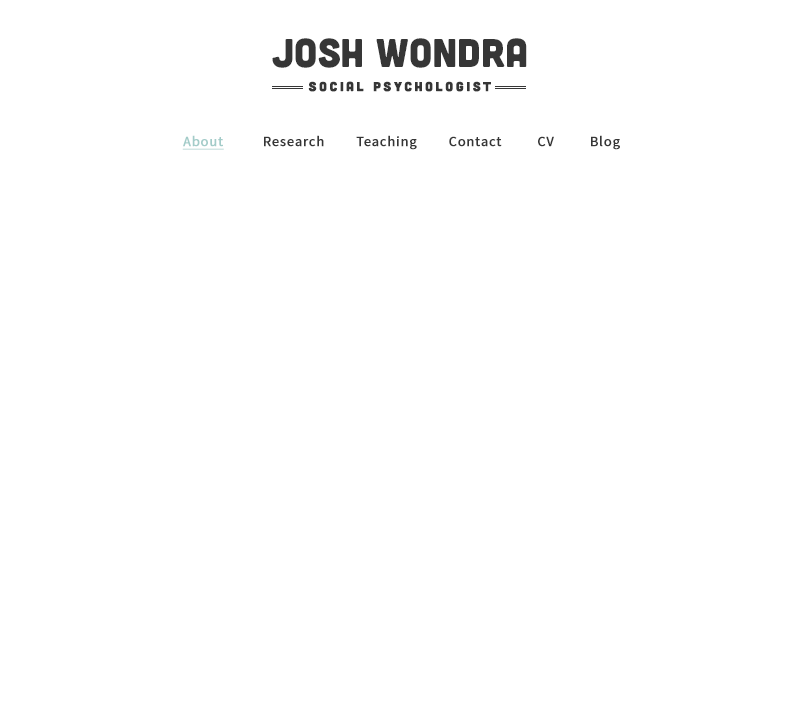
<style>
.page{position:relative;width:800px;height:704px;background:#ffffff}
.page>*{position:absolute;margin:0}
.t1{font:40px "Cubano-Regular";color:#363636}
.t2{font:13px "Cubano-Regular";letter-spacing:0.2em;color:#363636;font-weight:bold}
.t3{font:14px "SourceSansPro-Regular";letter-spacing:0.05em;color:#363636;font-weight:bold}
.t4{font:14px "SourceSansPro-Regular";letter-spacing:0.05em;color:#a3ccc9;font-weight:bold;text-decoration:underline}
</style>
<div class="page">
<p class="t1" style="left:272px;top:38px;width:255px;height:30px">Josh Wondra</p>
<p class="t2" style="left:308px;top:81px;width:183px;height:11px">social psychologist</p>
<p class="t3" style="left:182px;top:135px;width:438px;height:15px"><span class="t4">About          </span>Research        Teaching        Contact         CV         Blog</p>
</div>
